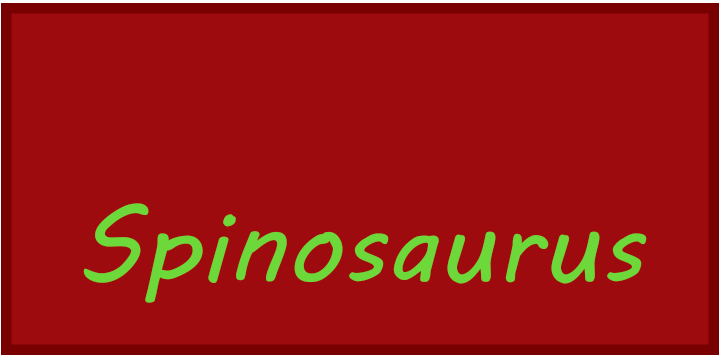
<style>
.page{position:relative;width:720px;height:360px;background:#9e0b0f}
.page>*{position:absolute;margin:0}
.t1{font:100px "MVBoli";color:#6dd839;scale:1.06 1}
</style>
<div class="page">
<p class="t1" style="left:83px;top:203px;width:564px;height:100px">Spinosaurus</p>
</div>
